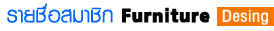
<style>
.page{position:relative;width:274px;height:31px;background:#ffffff}
.page>*{position:absolute;margin:0}
.t1{font:29.2px "PSLKanda";color:#0266fd;font-weight:bold}
.t2{font:29.2px "PSLImperialExtraSP";color:#020202;font-weight:bold}
.t3{font:25px "PSLDisplay";color:#fdfcfa;font-weight:bold}
</style>
<div class="page">
<p class="t1" style="left:7px;top:3px;width:106px;height:20px">รายชื่อสมาชิก</p>
<p class="t2" style="left:122px;top:7px;width:88px;height:16px">Furniture</p>
<p class="t3" style="left:222px;top:9px;width:46px;height:16px">Desing</p>
</div>
